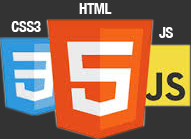
<style>
.page{position:relative;width:191px;height:139px;background:#333333}
.page>*{position:absolute;margin:0}
.t1{font:15px "HelveticaNeue-CondensedBold";letter-spacing:-0.025em;color:#ffffff}
</style>
<div class="page">
<p class="t1" style="left:79px;top:3px;width:33px;height:11px">HTML</p>
<p class="t1" style="left:11px;top:21px;width:30px;height:11px">CSS3</p>
<p class="t1" style="left:159px;top:27px;width:14px;height:11px">JS</p>
</div>
